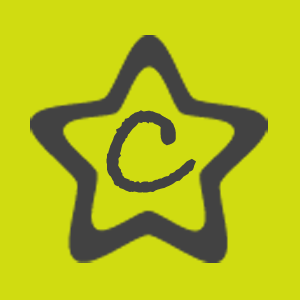
<style>
.page{position:relative;width:300px;height:300px;background:#d0dc11}
.page>*{position:absolute;margin:0}
.t1{font:150px "BradleyHandITCTTBold";color:#424242}
</style>
<div class="page">
<p class="t1" style="left:106px;top:110px;width:90px;height:83px">C</p>
</div>
